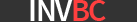
<style>
.page{position:relative;width:137px;height:22px;background:#333333}
.page>*{position:absolute;margin:0}
.t1{font:32px "SourceSansPro-Semibold";letter-spacing:-0.045em;color:#ffffff;text-transform:uppercase}
.t2{font:32px "SourceSansPro-Semibold";letter-spacing:-0.045em;color:#ff3f3f;text-transform:uppercase}
</style>
<div class="page">
<p class="t1" style="left:30px;top:0px;width:76px;height:21px">Inv<span class="t2">bc</span></p>
</div>
